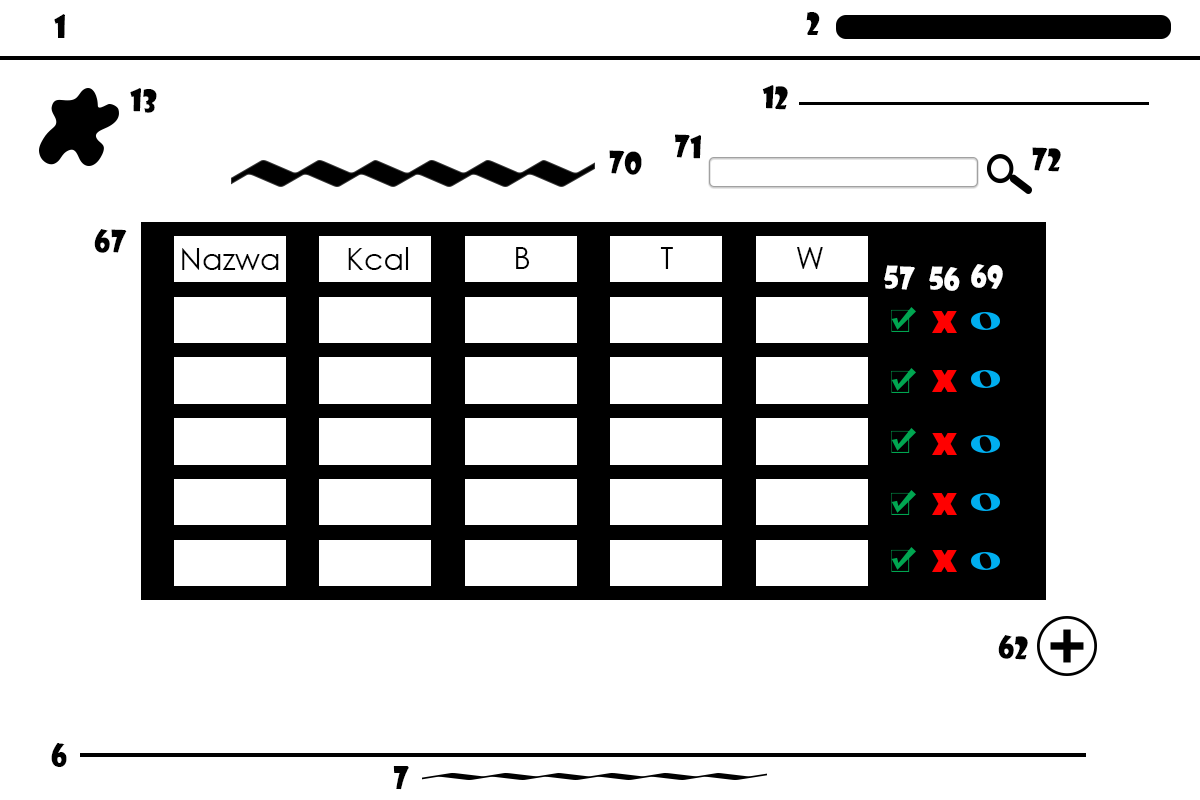
<style>
.page{position:relative;width:1200px;height:800px;background:#ffffff}
.page>*{position:absolute;margin:0}
.t1{font:30px "ShowcardGothic-Reg";color:#000000}
.t2{font:30px "CenturyGothic";color:#000000}
.t3{font:30px "ShowcardGothic-Reg";color:#ffffff}
</style>
<div class="page">
<p class="t1" style="left:54px;top:14px;width:11px;height:24px">1</p>
<p class="t1" style="left:806px;top:12px;width:14px;height:23px">2</p>
<p class="t1" style="left:130px;top:88px;width:27px;height:25px;rotate:2deg">13</p>
<p class="t1" style="left:762px;top:85px;width:26px;height:25px;rotate:2deg">12</p>
<p class="t1" style="left:675px;top:134px;width:26px;height:25px;rotate:2deg">71</p>
<p class="t1" style="left:609px;top:150px;width:33px;height:25px;rotate:2deg">70</p>
<p class="t1" style="left:1032px;top:147px;width:29px;height:25px;rotate:2deg">72</p>
<p class="t1" style="left:94px;top:229px;width:33px;height:24px;rotate:2deg">67</p>
<p class="t2" style="left:182px;top:248px;width:97px;height:22px">Nazwa</p>
<p class="t2" style="left:348px;top:247px;width:61px;height:23px">Kcal</p>
<p class="t2" style="left:516px;top:247px;width:14px;height:22px">B</p>
<p class="t2" style="left:660px;top:247px;width:13px;height:22px">T</p>
<p class="t2" style="left:797px;top:247px;width:26px;height:22px">W</p>
<p class="t3" style="left:884px;top:265px;width:31px;height:25px;rotate:2deg">57</p>
<p class="t3" style="left:929px;top:266px;width:31px;height:25px;rotate:2deg">56</p>
<p class="t3" style="left:971px;top:264px;width:32px;height:25px;rotate:2deg">69</p>
<p class="t1" style="left:998px;top:635px;width:30px;height:25px;rotate:2deg">62</p>
<p class="t1" style="left:51px;top:743px;width:16px;height:24px">6</p>
<p class="t1" style="left:393px;top:766px;width:16px;height:24px">7</p>
</div>
